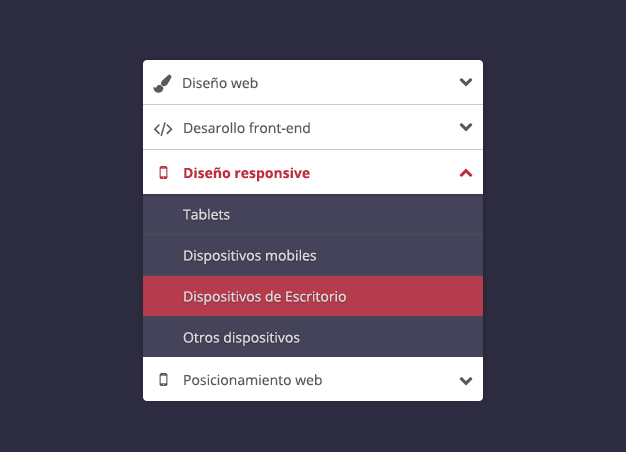
<style>
.page{position:relative;width:626px;height:452px;background:#2d2c41}
.page>*{position:absolute;margin:0}
.t1{font:14px "OpenSans";color:#595959}
.t2{font:14px "OpenSans-Bold";color:#c12c42}
.t3{font:14px "OpenSans";color:#d9d9d9}
</style>
<div class="page">
<p class="t1" style="left:183px;top:77px;width:75px;height:12px">Diseño web</p>
<p class="t1" style="left:184px;top:122px;width:126px;height:12px">Desarollo front-end</p>
<p class="t2" style="left:184px;top:167px;width:126px;height:15px">Diseño responsive</p>
<p class="t3" style="left:183px;top:208px;width:47px;height:12px">Tablets</p>
<p class="t3" style="left:184px;top:249px;width:132px;height:15px">Dispositivos mobiles</p>
<p class="t3" style="left:184px;top:290px;width:162px;height:15px">Dispositivos de Escritorio</p>
<p class="t3" style="left:183px;top:331px;width:117px;height:15px">Otros dispositivos</p>
<p class="t1" style="left:184px;top:374px;width:138px;height:12px">Posicionamiento web</p>
</div>
